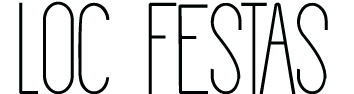
<style>
.page{position:relative;width:354px;height:94px;background:#ffffff}
.page>*{position:absolute;margin:0}
.t1{font:130px "Giraffe";color:#000303}
</style>
<div class="page">
<p class="t1" style="left:19px;top:1px;width:309px;height:94px">LOC  FESTAS</p>
</div>
